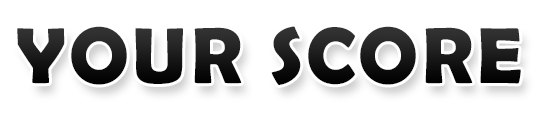
<style>
.page{position:relative;width:540px;height:120px;background:#ffffff}
.page>*{position:absolute;margin:0}
.t1{font:80px "BerlinSansFBDemi-Bold";letter-spacing:0.05em;color:#1b1b1b}
</style>
<div class="page">
<p class="t1" style="left:17px;top:26px;width:504px;height:59px">YOUR SCORE</p>
</div>
